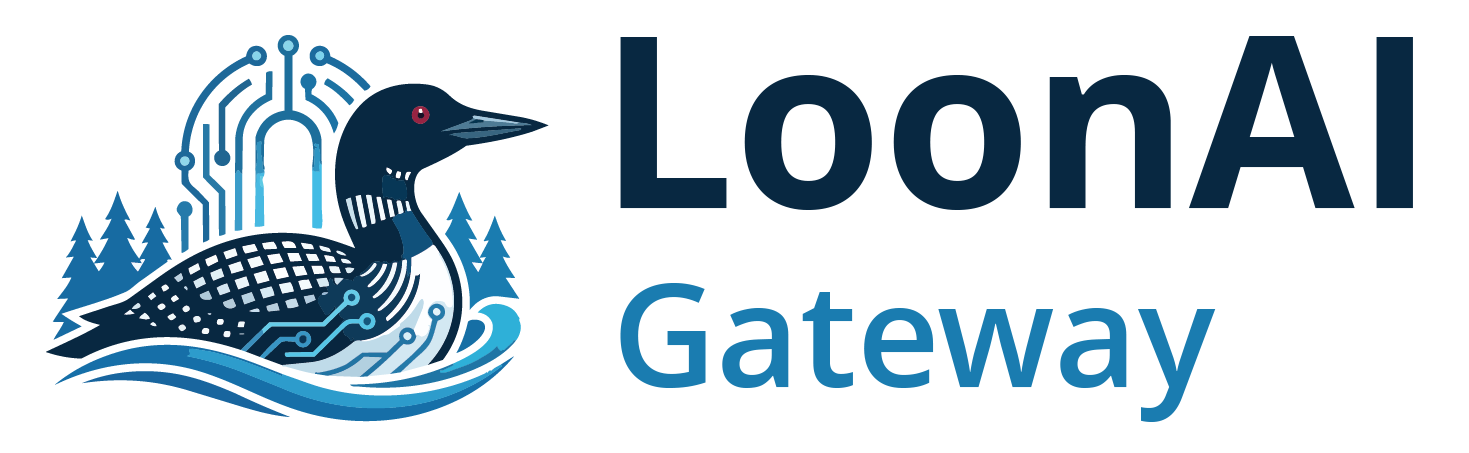
<style>
.page{position:relative;width:1469px;height:453px;background:#ffffff}
.page>*{position:absolute;margin:0}
.t1{font:240px "OpenSans-Bold";color:#082841}
.t2{font:144px "OpenSans-Semibold";color:#1a7cb0}
</style>
<div class="page">
<p class="t1" style="left:620px;top:36px;width:793px;height:174px">LoonAI</p>
<p class="t2" style="left:620px;top:283px;width:596px;height:139px">Gateway</p>
</div>
